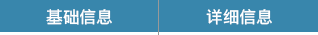
<style>
.page{position:relative;width:318px;height:35px;background:#3886ac}
.page>*{position:absolute;margin:0}
.t1{font:16.7px "LiHeiPro";color:#ffffff}
</style>
<div class="page">
<p class="t1" style="left:46px;top:9px;width:66px;height:16px">基础信息</p>
<p class="t1" style="left:206px;top:9px;width:66px;height:16px">详细信息</p>
</div>
